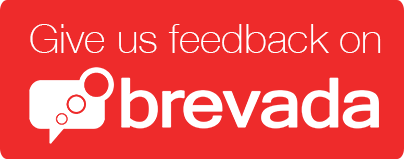
<style>
.page{position:relative;width:404px;height:159px;background:#ee2b2b}
.page>*{position:absolute;margin:0}
.t1{font:41px "HelveticaNeue-Thin";color:#ffffff}
</style>
<div class="page">
<p class="t1" style="left:30px;top:24px;width:351px;height:29px">Give us feedback on</p>
</div>
